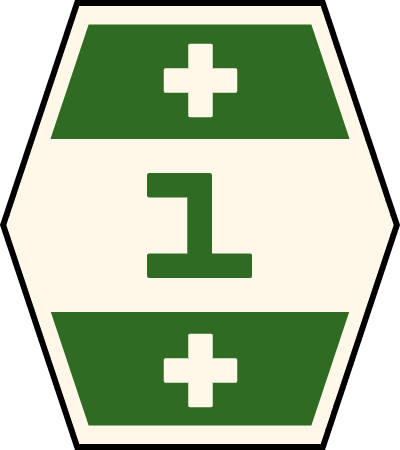
<style>
.page{position:relative;width:400px;height:450px;background:#fff8e9}
.page>*{position:absolute;margin:0}
.t1{font:120px/290px "SaculBasic";color:#fff8e9}
.t2{font:120px "SaculBasic";color:#2f6b23}
</style>
<div class="page">
<p class="t1" style="left:163px;top:43px;width:75px;height:365px;text-align:center">+<br>+</p>
<p class="t2" style="left:147px;top:173px;width:106px;height:105px">1</p>
</div>
